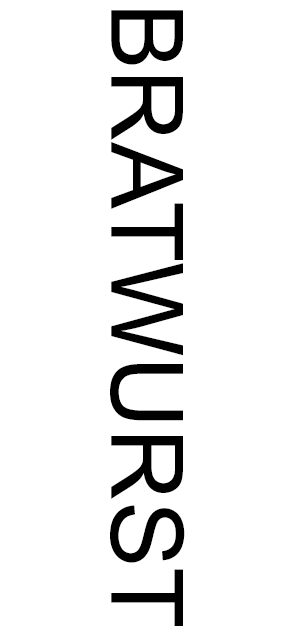
<style>
.page{position:relative;width:295px;height:638px;background:#ffffff}
.page>*{position:absolute;margin:0}
.t1{font:100px "ArialMT";color:#000000}
</style>
<div class="page">
<p class="t1" style="left:110px;top:10px;width:75px;height:616px;rotate:90deg">BRATWURST</p>
</div>
